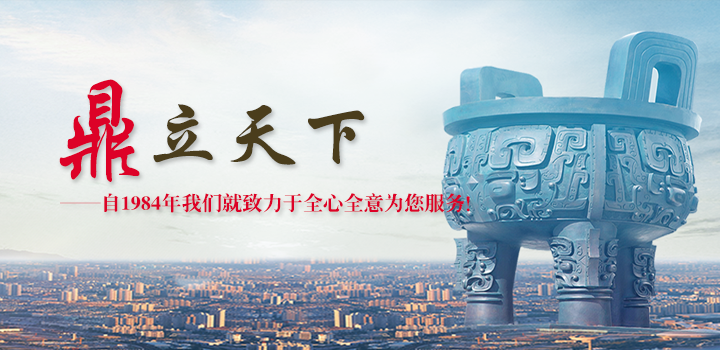
<style>
.page{position:relative;width:720px;height:350px}
.page>*{position:absolute;margin:0}
.t1{font:110.4px "FZXKJW--GB1-0";color:#dd0127}
.t2{font:77.5px "FZXKJW--GB1-0";color:#4a3d1c}
.t3{font:20px "CTLaoSongSJ";color:#dd0127}
</style>
<div class="page">
<p class="t1" style="left:59px;top:79px;width:81px;height:103px">鼎</p>
<p class="t2" style="left:153px;top:104px;width:212px;height:61px">立天下</p>
<p class="t3" style="left:60px;top:193px;width:410px;height:20px">——自1984年我们就致力于全心全意为您服务！</p>
</div>
